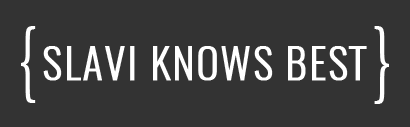
<style>
.page{position:relative;width:410px;height:127px;background:#333333}
.page>*{position:absolute;margin:0}
.t1{font:80px "Oswald-ExtraLight";letter-spacing:0.024em;color:#ffffff;text-transform:uppercase}
.t2{font:42.1px "Oswald-Light";letter-spacing:0.024em;color:#ffffff;text-transform:uppercase;font-weight:bold}
</style>
<div class="page">
<p class="t1" style="left:21px;top:26px;width:15px;height:77px">{</p>
<p class="t1" style="left:374px;top:26px;width:15px;height:78px;rotate:180deg">{</p>
<p class="t2" style="left:43px;top:46px;width:324px;height:35px">Slavi Knows best</p>
</div>
